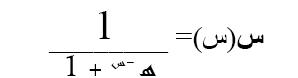
<style>
.page{position:relative;width:298px;height:78px;background:#ffffff}
.page>*{position:absolute;margin:0}
.t1{font:31.6px "TimesNewRomanPSMT";color:#000000}
.t2{font:22.4px "TimesNewRomanPSMT";color:#000000}
.t3{font:22.4px "TimesNewRomanPS-BoldMT";color:#000000}
.t4{font:22.4px "TimesNewRomanPSMT";color:#ffffff}
.t5{font:24.7px "Andalus";color:#000000}
</style>
<div class="page">
<p class="t1" style="left:99px;top:11px;width:11px;height:28px">1</p>
<p class="t2" style="left:37px;top:27px;width:227px;height:26px"><span class="t3">س</span>(س)= ________<span class="t4">1</span></p>
<p class="t5" style="left:66px;top:55px;width:90px;height:21px">1 + ه -س</p>
</div>
